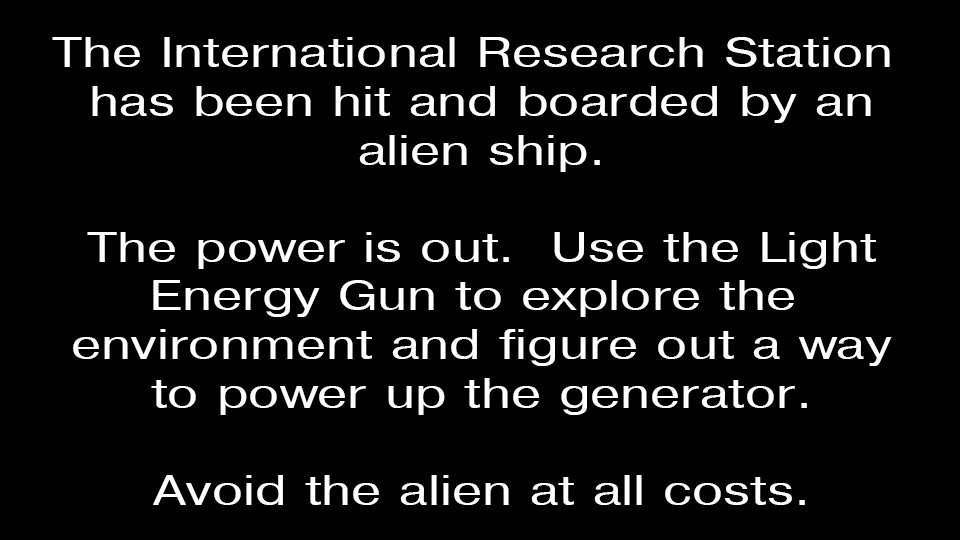
<style>
.page{position:relative;width:960px;height:540px;background:#000000}
.page>*{position:absolute;margin:0}
.t1{font:40.5px "Helvetica";color:#ffffff;scale:1.33 1}
</style>
<div class="page">
<p class="t1" style="left:52px;top:37px;width:840px;height:468px;text-align:center">The International Research Station <br>has been hit and boarded by an<br>alien ship.<br><br>The power is out.  Use the Light<br>Energy Gun to explore the <br>environment and figure out a way<br>to power up the generator.<br><br>Avoid the alien at all costs.</p>
</div>
